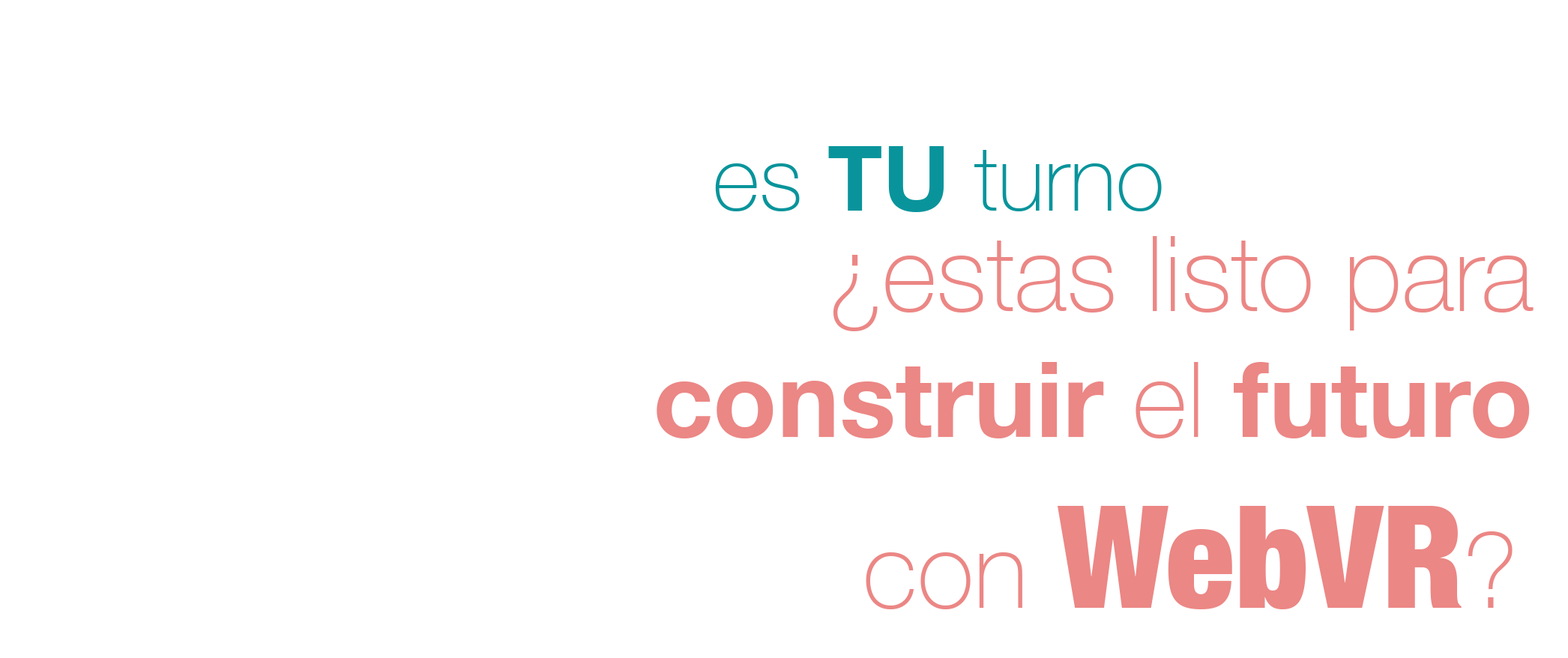
<style>
.page{position:relative;width:1568px;height:658px;background:#ffffff}
.page>*{position:absolute;margin:0}
.t1{font:89.9px "HelveticaNeue-Thin";color:#09949b}
.t2{font:89.9px "HelveticaNeue-Bold";color:#09949b}
.t3{font:104.9px "HelveticaNeue-Thin";color:#eb8785}
.t4{font:104.9px "HelveticaNeue-Bold";color:#eb8785}
.t5{font:142.4px "HelveticaNeue-CondensedBlack";color:#eb8785}
</style>
<div class="page">
<p class="t1" style="left:715px;top:146px;width:447px;height:66px">es <span class="t2">TU </span>turno</p>
<p class="t3" style="left:657px;top:236px;width:877px;height:373px;text-align:right">¿estas listo para<br><span class="t4">construir </span>el <span class="t4">futuro<br></span>con <span class="t5">WebVR</span>?</p>
</div>
